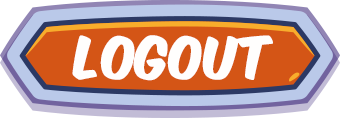
<style>
.page{position:relative;width:340px;height:118px;background:#d45516}
.page>*{position:absolute;margin:0}
.t1{font:50px "KomikaAxis";color:#fffefd}
</style>
<div class="page">
<p class="t1" style="left:72px;top:35px;width:201px;height:46px">Logout</p>
</div>
